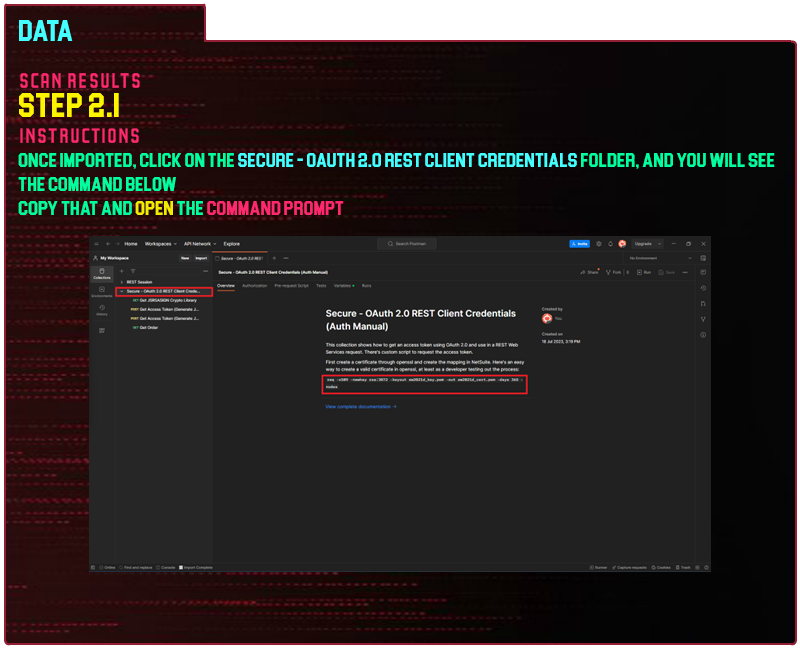
<style>
.page{position:relative;width:800px;height:650px;background:#212121}
.page>*{position:absolute;margin:0}
.t1{font:30px "Blockletter";color:#43ffff}
.t2{font:35px "Party-Lights-[WLM]-Flat";color:#ff296d}
.t3{font:35px "Blockletter";color:#fdf500}
.t4{font:20px "Blockletter";color:#00ff9f}
.t5{font:20px "Blockletter";color:#43ffff}
.t6{font:20px "Blockletter";color:#f3eb01}
.t7{font:20px "Blockletter";color:#ff296d}
</style>
<div class="page">
<p class="t1" style="left:19px;top:20px;width:54px;height:21px">Data</p>
<p class="t2" style="left:20px;top:73px;width:120px;height:15px">Scan REsults</p>
<p class="t3" style="left:19px;top:93px;width:100px;height:24px">step 2.1</p>
<p class="t2" style="left:20px;top:128px;width:119px;height:15px">instructions</p>
<p class="t4" style="left:18px;top:153px;width:757px;height:62px">once imported, click on the <span class="t5">secure - Oauth 2.0 rest client credentials</span> folder, and you will see the command below<br>copy that and <span class="t6">open</span> the <span class="t7">command prompt</span></p>
</div>
